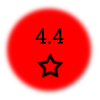
<style>
.page{position:relative;width:100px;height:100px;background:#ff0000}
.page>*{position:absolute;margin:0}
.t1{font:36px "RobotoSlab-Regular";color:#000000}
</style>
<div class="page">
<p class="t1" style="left:35px;top:28px;width:29px;height:16px">4.4</p>
</div>
